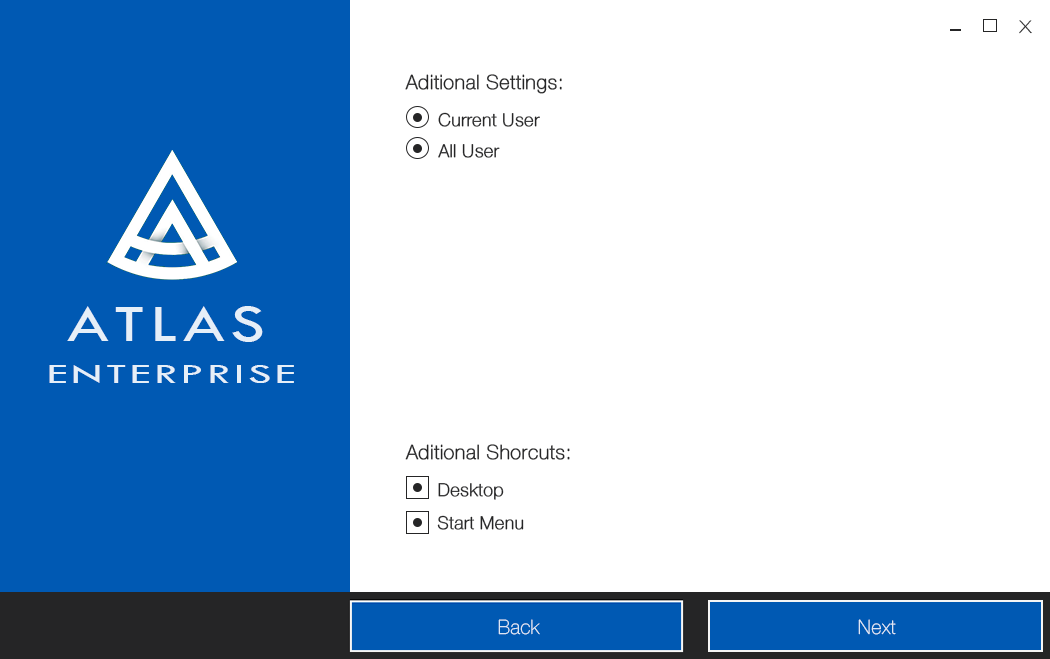
<style>
.page{position:relative;width:1050px;height:659px;background:#ffffff}
.page>*{position:absolute;margin:0}
.t1{font:24px "HelveticaNeue-Thin";color:#252526;scale:1.2 1}
.t2{font:20px "HelveticaNeue-Thin";color:#252526;font-weight:bold}
.t3{font:18px "HelveticaNeue-Thin";color:#252526;font-weight:bold}
.t4{font:54px "TwCenMT-Regular";letter-spacing:0.075em;color:#e6eff8;scale:1.3 1}
.t5{font:28.8px "TwCenMT-Regular";letter-spacing:0.075em;color:#e6eff8;scale:1.62 1}
.t6{font:20px "HelveticaNeue-Thin";color:#e6eff8}
</style>
<div class="page">
<p class="t1" style="left:1019px;top:20px;width:13px;height:14px">x</p>
<p class="t2" style="left:405px;top:74px;width:157px;height:20px">Aditional Settings:</p>
<p class="t3" style="left:438px;top:112px;width:102px;height:15px">Current User</p>
<p class="t3" style="left:438px;top:144px;width:62px;height:14px">All User</p>
<p class="t4" style="left:67px;top:306px;width:196px;height:36px">ATLAS</p>
<p class="t5" style="left:49px;top:365px;width:245px;height:18px">ENTERPRISE</p>
<p class="t2" style="left:405px;top:444px;width:165px;height:16px">Aditional Shorcuts:</p>
<p class="t3" style="left:438px;top:483px;width:66px;height:17px">Desktop</p>
<p class="t3" style="left:437px;top:515px;width:87px;height:15px">Start Menu</p>
<p class="t6" style="left:498px;top:619px;width:42px;height:16px">Back</p>
<p class="t6" style="left:858px;top:619px;width:38px;height:16px">Next</p>
</div>
